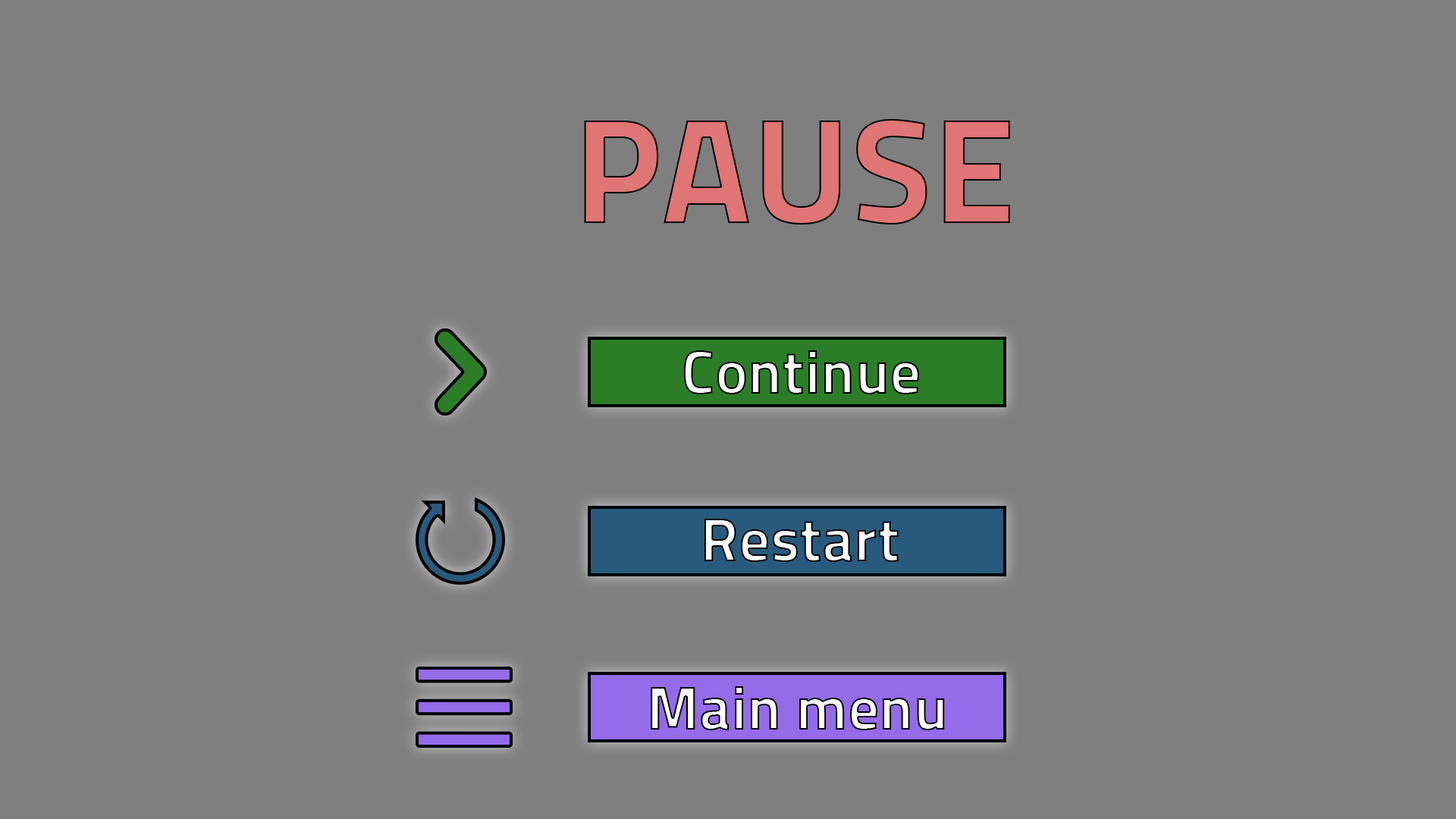
<style>
.page{position:relative;width:1456px;height:819px;background:#7f7f7f}
.page>*{position:absolute;margin:0}
.t1{font:150.5px "Sunflower-Bold";color:#df7575}
.t2{font:62.2px "Sunflower-Bold"}
</style>
<div class="page">
<p class="t1" style="left:584px;top:119px;width:426px;height:105px">PAUSE</p>
<p class="t2" style="left:683px;top:350px;width:236px;height:44px">Continue</p>
<p class="t2" style="left:704px;top:519px;width:195px;height:43px">Restart</p>
<p class="t2" style="left:651px;top:686px;width:294px;height:44px">Main menu</p>
</div>
